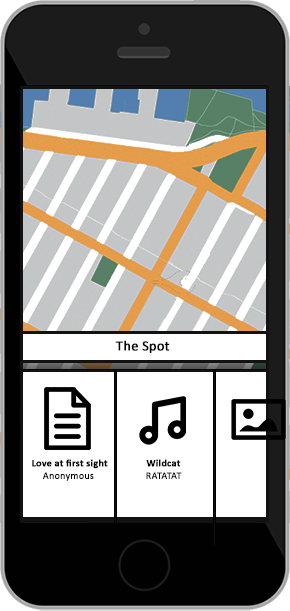
<style>
.page{position:relative;width:290px;height:611px;background:#ffffff}
.page>*{position:absolute;margin:0}
.t1{font:14px "Calibri";letter-spacing:0.005em;color:#000000;font-weight:bold}
.t2{font:10px "Calibri-Bold";letter-spacing:0.005em;color:#000000;font-weight:bold}
.t3{font:10px "Calibri";letter-spacing:0.005em;color:#000000;font-weight:bold}
</style>
<div class="page">
<p class="t1" style="left:115px;top:340px;width:55px;height:13px">The Spot</p>
<p class="t2" style="left:32px;top:459px;width:76px;height:10px">Love at first sight</p>
<p class="t2" style="left:146px;top:459px;width:35px;height:8px">Wildcat</p>
<p class="t3" style="left:43px;top:472px;width:51px;height:9px">Anonymous</p>
<p class="t3" style="left:146px;top:472px;width:36px;height:7px">RATATAT</p>
</div>
